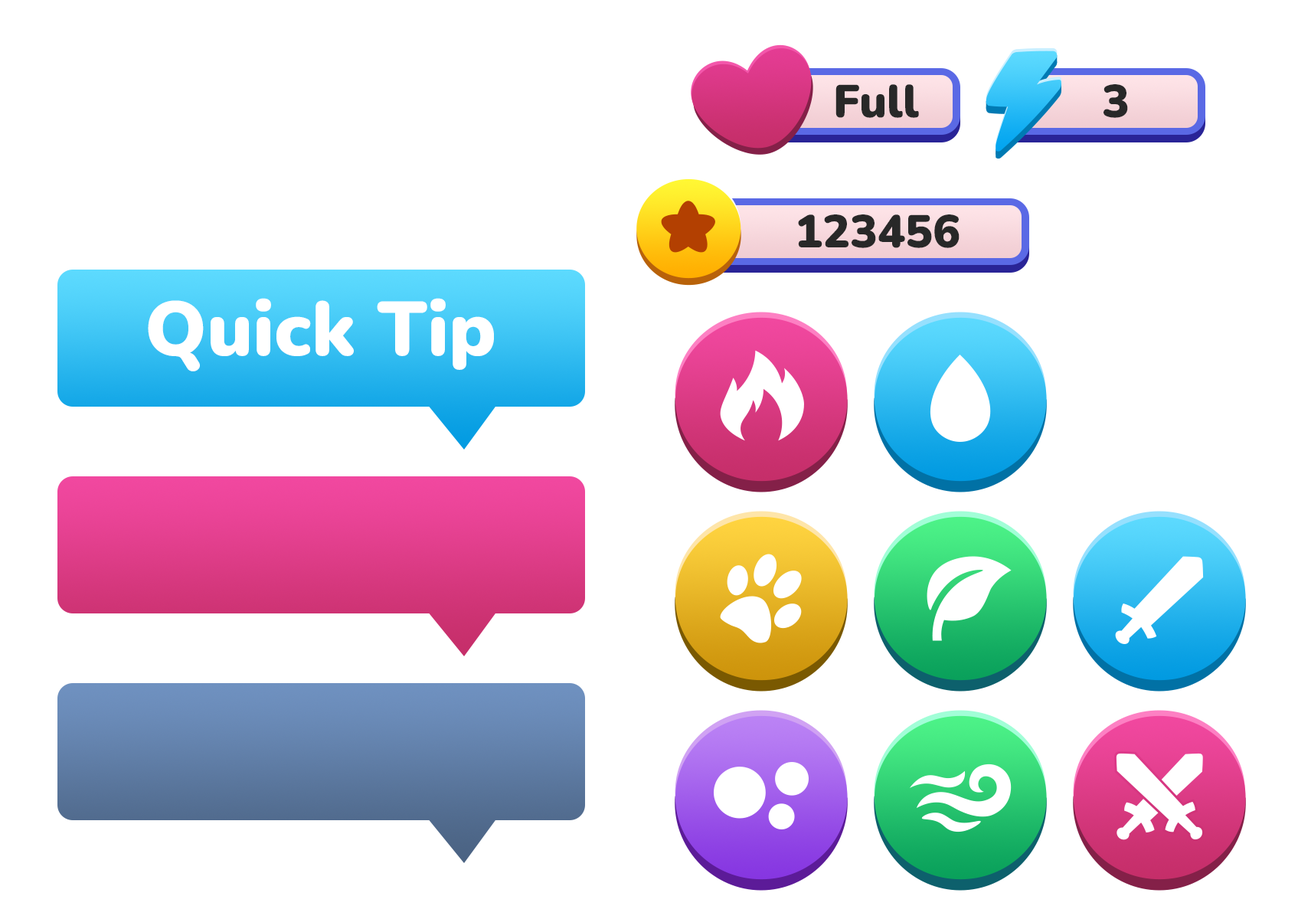
<style>
.page{position:relative;width:1298px;height:919px;background:#ffffff}
.page>*{position:absolute;margin:0}
.t1{font:45.9px "Nunito-Black";color:#282828}
.t2{font:76.6px "Nunito-Black";color:#ffffff}
</style>
<div class="page">
<p class="t1" style="left:835px;top:84px;width:84px;height:34px">Full</p>
<p class="t1" style="left:1103px;top:84px;width:25px;height:34px">3</p>
<p class="t1" style="left:798px;top:214px;width:161px;height:34px">123456</p>
<p class="t2" style="left:148px;top:298px;width:346px;height:73px">Quick Tip</p>
</div>
